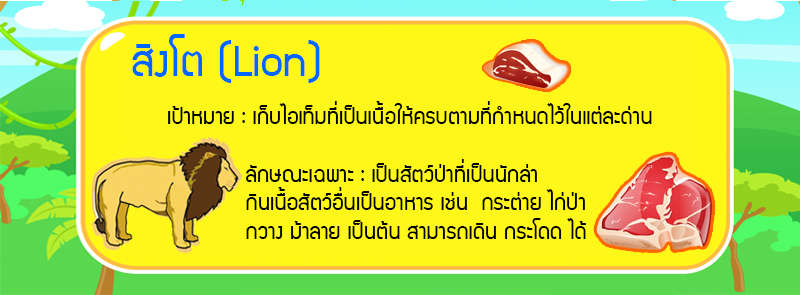
<style>
.page{position:relative;width:800px;height:295px;background:#fff719}
.page>*{position:absolute;margin:0}
.t1{font:24px "supermarket";color:#000000}
.t2{font:48px "supermarket";color:#0066ff}
</style>
<div class="page">
<p class="t1" style="left:132px;top:34px;width:520px;height:205px"><span class="t2">สิงโต (Lion)<br><br><br></span> เป้าหมาย : เก็บไอเท็มที่เป็นเนื้อให้ครบตามที่กำหนดไว้ในแต่ละด่าน <br><br>    ลักษณะเฉพาะ : เป็นสัตว์ป่าที่เป็นนักล่า          กินเนื้อสัตว์อื่นเป็นอาหาร เช่น  กระต่าย ไก่ป่า <br>    กวาง ม้าลาย เป็นต้น สามารถเดิน กระโดด ได้         ชอบอาศัยอยู่ในป่าเขตร้อน</p>
</div>
